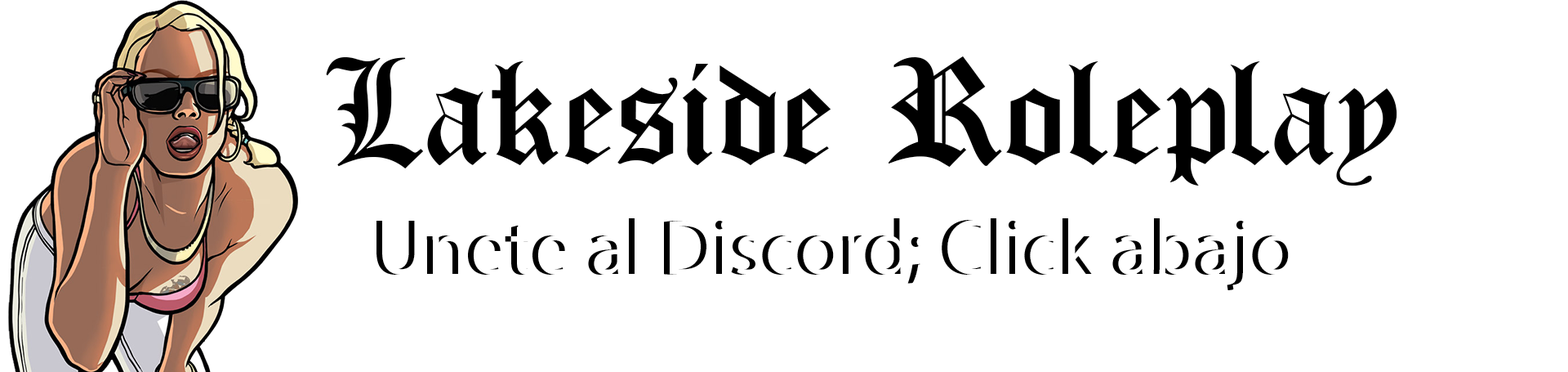
<style>
.page{position:relative;width:1568px;height:372px;background:#ffffff}
.page>*{position:absolute;margin:0}
.t1{font:163.3px "OldLondon";color:#000000}
.t2{font:163.3px "OldLondon"}
.t3{font:78.4px "MyriadPro-Regular"}
</style>
<div class="page">
<p class="t1" style="left:326px;top:56px;width:1071px;height:129px">Lakeside Roleplay</p>
<p class="t2" style="left:331px;top:56px;width:1071px;height:129px">Lakeside Roleplay</p>
<p class="t3" style="left:376px;top:218px;width:914px;height:72px">Unete al Discord; Click abajo</p>
</div>
